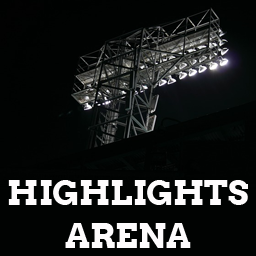
<style>
.page{position:relative;width:256px;height:256px;background:#010302}
.page>*{position:absolute;margin:0}
.t1{font:33.8px/42.7px "Arvo-Bold";letter-spacing:0.002em;color:#ffffff}
</style>
<div class="page">
<p class="t1" style="left:8px;top:180px;width:240px;height:68px;text-align:center">HIGHLIGHTS<br>ARENA</p>
</div>
